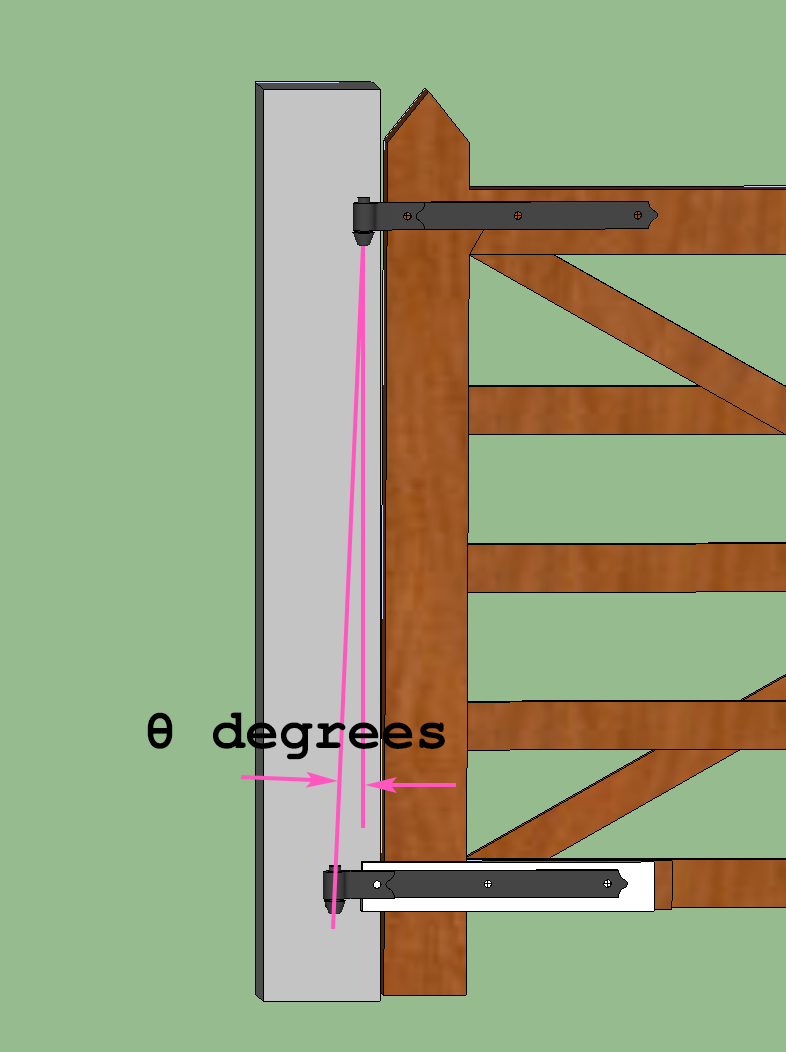
<style>
.page{position:relative;width:786px;height:1052px;background:#96bb8f}
.page>*{position:absolute;margin:0}
.t1{font:56.7px "FreeMonoBold";color:#000000}
</style>
<div class="page">
<p class="t1" style="left:147px;top:712px;width:298px;height:48px">θ degrees</p>
</div>
